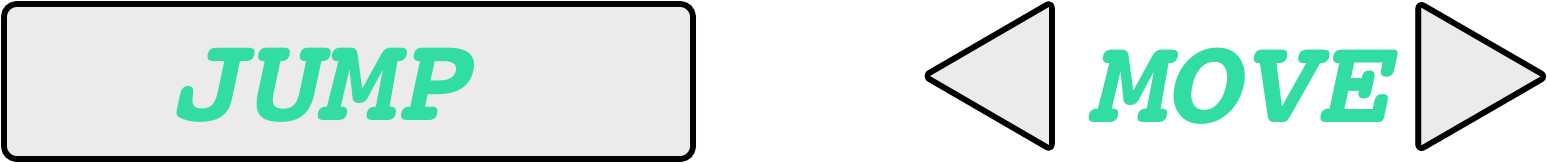
<style>
.page{position:relative;width:1547px;height:163px;background:#ebebeb}
.page>*{position:absolute;margin:0}
.t1{font:125px "Courier-BoldOblique";color:#31dda2}
</style>
<div class="page">
<p class="t1" style="left:176px;top:47px;width:299px;height:75px">JUMP</p>
<p class="t1" style="left:1088px;top:47px;width:310px;height:77px">MOVE</p>
</div>
